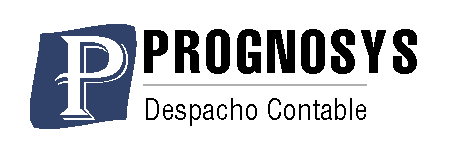
<style>
.page{position:relative;width:450px;height:150px;background:#ffffff}
.page>*{position:absolute;margin:0}
.t1{font:60px "HelveticaLTStd-Comp";letter-spacing:0.05em;color:#000000}
.t2{font:126px "Algerian";letter-spacing:0.05em;color:#ffffff}
.t3{font:30px "HelveticaLTStd-Cond";color:#000000}
</style>
<div class="page">
<p class="t1" style="left:144px;top:29px;width:273px;height:45px">PROGNOSYS</p>
<p class="t2" style="left:55px;top:36px;width:73px;height:84px">P</p>
<p class="t3" style="left:146px;top:98px;width:220px;height:28px">Despacho Contable</p>
</div>
